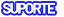
<style>
.page{position:relative;width:64px;height:17px;background:#ffffff}
.page>*{position:absolute;margin:0}
.t1{font:14.7px "Barlow-Bold";letter-spacing:-0.1em;color:#ffffff}
</style>
<div class="page">
<p class="t1" style="left:3px;top:3px;width:52px;height:11px">SUPORTE</p>
</div>
